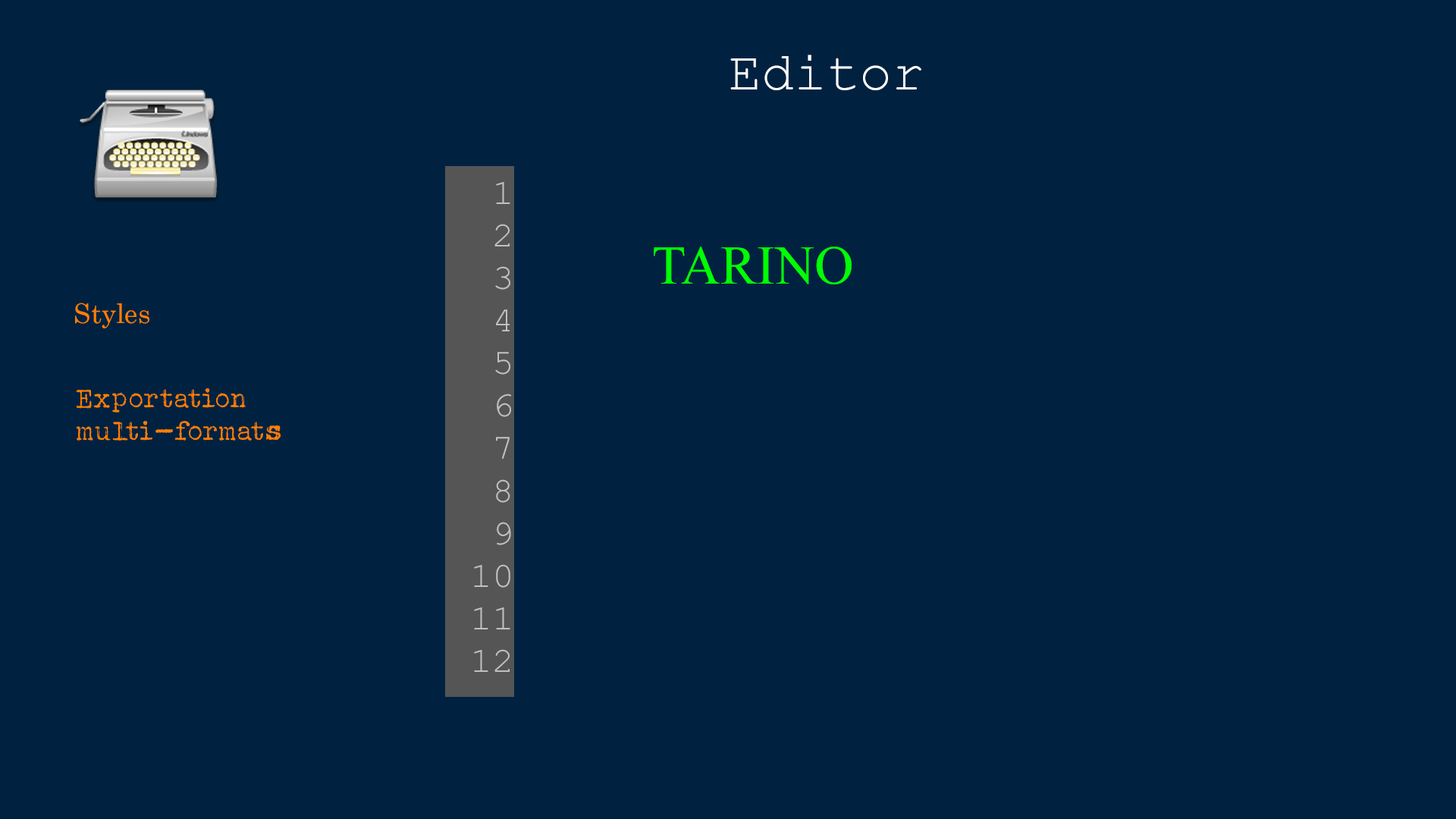
<style>
.page{position:relative;width:1456px;height:819px;background:#002240}
.page>*{position:absolute;margin:0}
.t1{font:54.4px "CourierNewPSMT";color:#ffffff}
.t2{font:35.5px "CourierNewPSMT";color:#c0c0c0}
.t3{font:54.4px "TimesNewRomanPSMT";color:#02ff02}
.t4{font:27.2px "Century";color:#ff8000}
.t5{font:27.2px "Albertsthal-Typewriter";color:#ff8000}
</style>
<div class="page">
<p class="t1" style="left:730px;top:55px;width:191px;height:35px">Editor</p>
<p class="t2" style="left:474px;top:181px;width:37px;height:491px;text-align:right">1<br>2<br>3<br>4<br>5<br>6<br>7<br>8<br>9<br>10<br>11<br>12</p>
<p class="t3" style="left:654px;top:246px;width:198px;height:38px">TARINO</p>
<p class="t4" style="left:75px;top:303px;width:74px;height:25px">Styles</p>
<p class="t5" style="left:76px;top:388px;width:205px;height:53px">Exportation<br>multi-formats</p>
</div>
